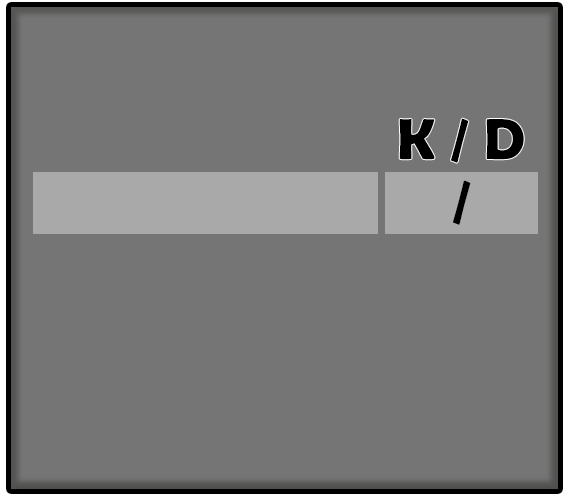
<style>
.page{position:relative;width:570px;height:498px;background:#757575}
.page>*{position:absolute;margin:0}
.t1{font:58.3px "BerlinSansFBDemi-Bold";color:#000000}
</style>
<div class="page">
<p class="t1" style="left:399px;top:118px;width:125px;height:45px">K / D</p>
<p class="t1" style="left:453px;top:180px;width:18px;height:45px">/</p>
</div>
